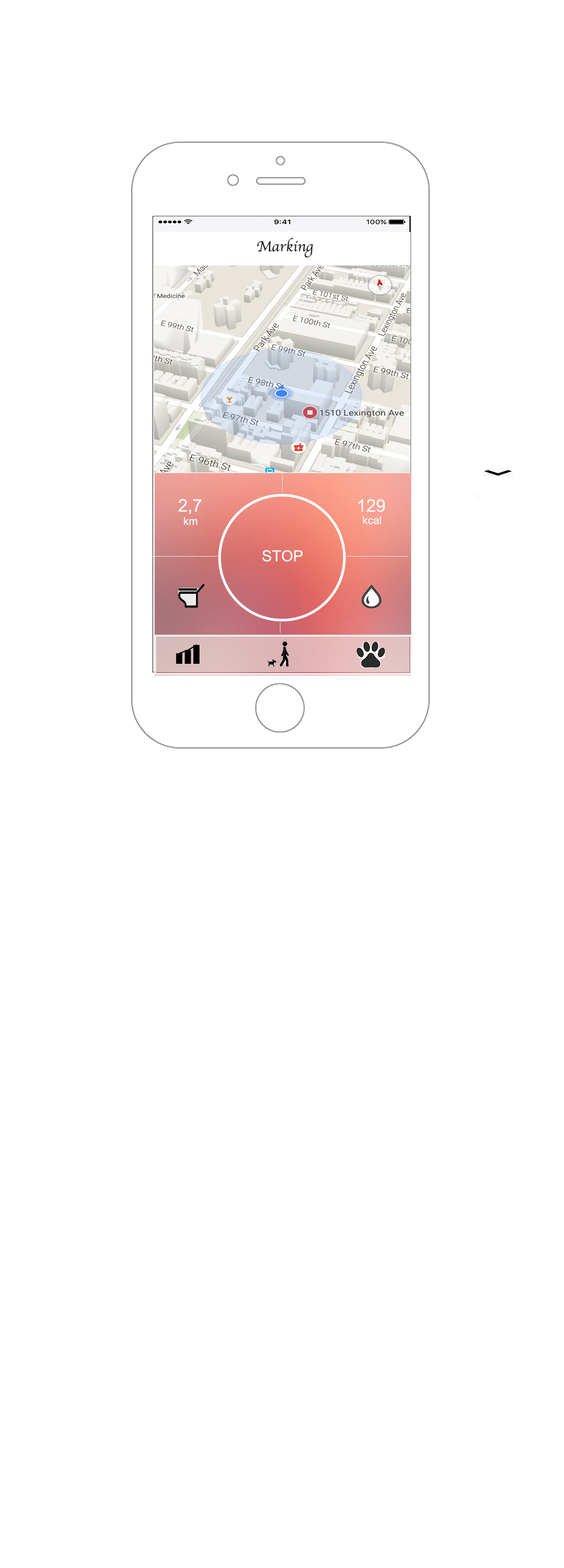
<style>
.page{position:relative;width:564px;height:1568px;background:#ffffff}
.page>*{position:absolute;margin:0}
.t1{font:15.2px "Apple-Chancery";color:#1e1d1c}
.t2{font:15.2px "ArialMT";color:#faf6f4}
.t3{font:17.4px "ArialMT";color:#faf6f4}
.t4{font:10.9px "ArialMT";color:#faf6f4}
</style>
<div class="page">
<p class="t1" style="left:257px;top:238px;width:57px;height:20px">Marking</p>
<p class="t2" style="left:474px;top:493px;width:8px;height:8px;rotate:90deg">&gt;</p>
<p class="t3" style="left:178px;top:499px;width:24px;height:15px">2,7</p>
<p class="t3" style="left:359px;top:499px;width:26px;height:13px">129</p>
<p class="t4" style="left:184px;top:517px;width:14px;height:8px">km</p>
<p class="t4" style="left:363px;top:516px;width:19px;height:8px">kcal</p>
<p class="t2" style="left:262px;top:550px;width:41px;height:12px">STOP</p>
</div>
